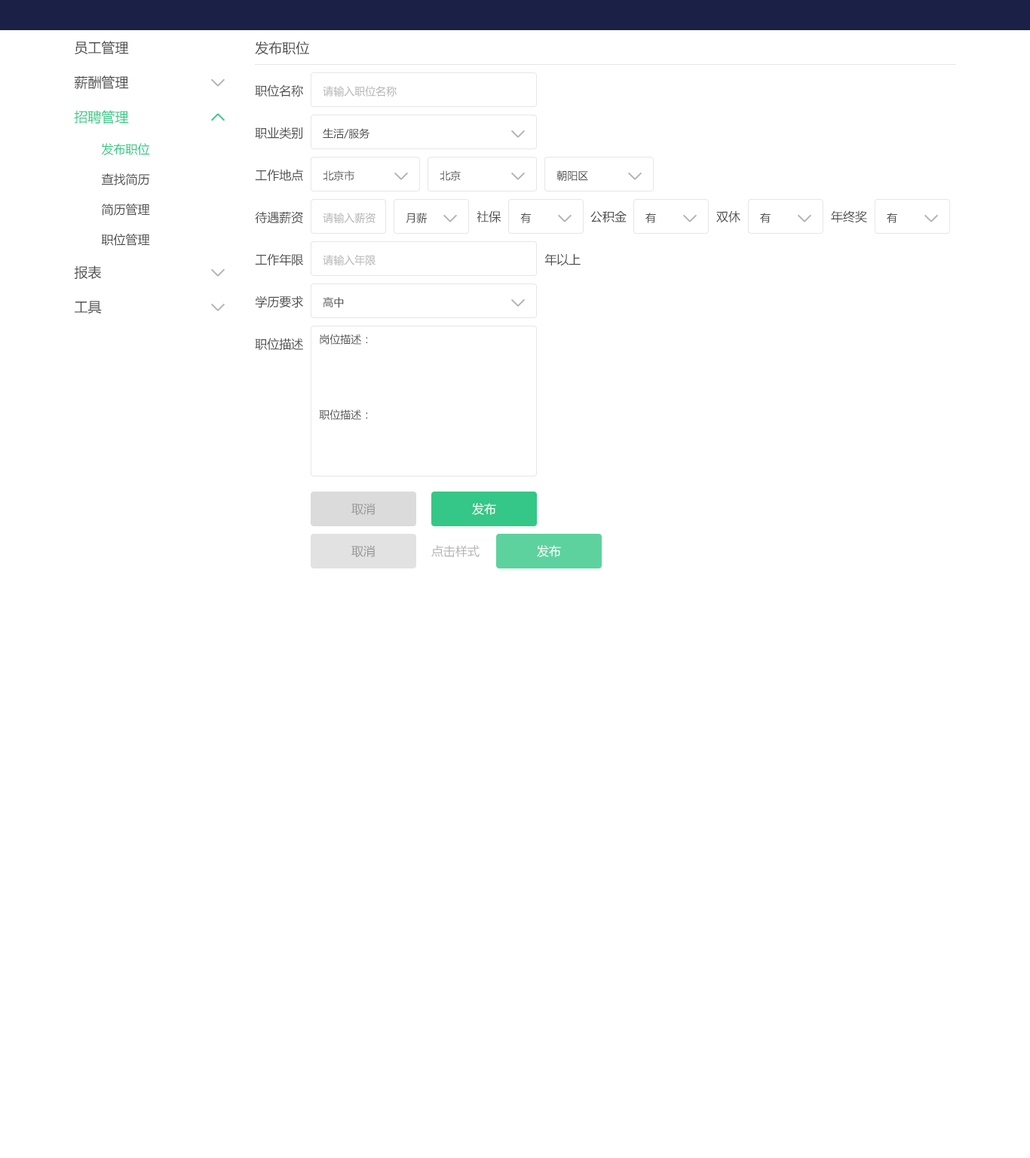
<style>
.page{position:relative;width:1030px;height:1158px;background:#ffffff}
.page>*{position:absolute;margin:0}
.t1{font:13.6px "MicrosoftYaHei";color:#4d4d4d}
.t2{font:12.1px "MicrosoftYaHei";color:#4d4d4d}
.t3{font:10.6px "MicrosoftYaHei";color:#b3b3b3}
.t4{font:13.6px "MicrosoftYaHei";color:#35c787}
.t5{font:10.6px "MicrosoftYaHei";color:#4d4d4d}
.t6{font:12.1px "MicrosoftYaHei";color:#35c787}
.t7{font:12.1px "MicrosoftYaHei";color:#999999}
.t8{font:12.1px "MicrosoftYaHei";color:#ffffff}
.t9{font:12.1px "MicrosoftYaHei";color:#b3b3b3}
</style>
<div class="page">
<p class="t1" style="left:75px;top:41px;width:54px;height:13px">员工管理</p>
<p class="t1" style="left:255px;top:41px;width:54px;height:14px">发布职位</p>
<p class="t1" style="left:74px;top:75px;width:55px;height:14px">薪酬管理</p>
<p class="t2" style="left:255px;top:84px;width:48px;height:13px">职位名称</p>
<p class="t3" style="left:323px;top:86px;width:74px;height:10px">请输入职位名称</p>
<p class="t4" style="left:74px;top:110px;width:55px;height:14px">招聘管理</p>
<p class="t2" style="left:255px;top:127px;width:47px;height:12px">职业类别</p>
<p class="t5" style="left:323px;top:128px;width:47px;height:11px">生活/服务</p>
<p class="t6" style="left:101px;top:143px;width:49px;height:12px">发布职位</p>
<p class="t2" style="left:101px;top:173px;width:49px;height:12px">查找简历</p>
<p class="t2" style="left:255px;top:169px;width:48px;height:12px">工作地点</p>
<p class="t5" style="left:323px;top:170px;width:31px;height:11px">北京市</p>
<p class="t5" style="left:440px;top:170px;width:21px;height:11px">北京</p>
<p class="t5" style="left:556px;top:170px;width:32px;height:11px">朝阳区</p>
<p class="t2" style="left:101px;top:204px;width:49px;height:12px">简历管理</p>
<p class="t2" style="left:255px;top:211px;width:48px;height:13px">待遇薪资</p>
<p class="t3" style="left:323px;top:213px;width:52px;height:10px">请输入薪资</p>
<p class="t5" style="left:406px;top:213px;width:21px;height:10px">月薪</p>
<p class="t2" style="left:476px;top:210px;width:25px;height:13px">社保</p>
<p class="t5" style="left:520px;top:213px;width:11px;height:10px">有</p>
<p class="t2" style="left:590px;top:210px;width:36px;height:13px">公积金</p>
<p class="t5" style="left:645px;top:213px;width:11px;height:10px">有</p>
<p class="t2" style="left:716px;top:210px;width:24px;height:13px">双休</p>
<p class="t5" style="left:760px;top:213px;width:10px;height:10px">有</p>
<p class="t2" style="left:831px;top:210px;width:36px;height:13px">年终奖</p>
<p class="t5" style="left:887px;top:213px;width:10px;height:10px">有</p>
<p class="t2" style="left:101px;top:234px;width:49px;height:12px">职位管理</p>
<p class="t2" style="left:255px;top:253px;width:49px;height:13px">工作年限</p>
<p class="t3" style="left:323px;top:255px;width:52px;height:10px">请输入年限</p>
<p class="t2" style="left:544px;top:253px;width:36px;height:13px">年以上</p>
<p class="t1" style="left:74px;top:265px;width:28px;height:14px">报表</p>
<p class="t1" style="left:75px;top:301px;width:27px;height:13px">工具</p>
<p class="t2" style="left:255px;top:296px;width:48px;height:12px">学历要求</p>
<p class="t5" style="left:323px;top:297px;width:21px;height:11px">高中</p>
<p class="t2" style="left:255px;top:338px;width:48px;height:13px">职位描述</p>
<p class="t5" style="left:320px;top:334px;width:48px;height:11px">岗位描述：</p>
<p class="t5" style="left:319px;top:409px;width:49px;height:11px">职位描述：</p>
<p class="t7" style="left:351px;top:503px;width:24px;height:12px">取消</p>
<p class="t8" style="left:472px;top:503px;width:24px;height:12px">发布</p>
<p class="t7" style="left:351px;top:545px;width:24px;height:12px">取消</p>
<p class="t9" style="left:431px;top:545px;width:48px;height:12px">点击样式</p>
<p class="t8" style="left:537px;top:545px;width:24px;height:12px">发布</p>
</div>
